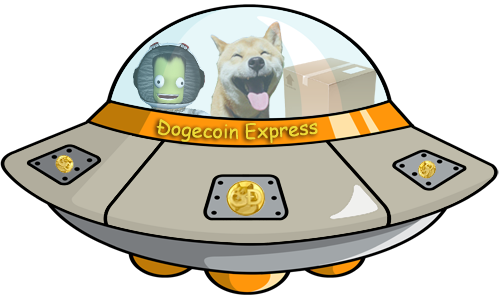
<style>
.page{position:relative;width:500px;height:297px;background:#ffffff}
.page>*{position:absolute;margin:0}
.t1{font:19.3px "ComicSansMS";color:#edda37}
</style>
<div class="page">
<p class="t1" style="left:156px;top:119px;width:162px;height:24px">Ðogecoin Express</p>
</div>
